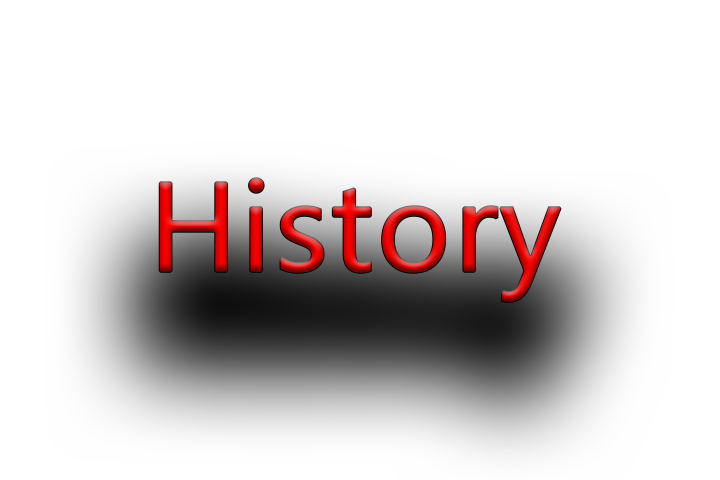
<style>
.page{position:relative;width:720px;height:480px;background:#ffffff}
.page>*{position:absolute;margin:0}
.t1{font:125px "MicrosoftNewTaiLue";color:#ff0000;font-weight:bold}
</style>
<div class="page">
<p class="t1" style="left:158px;top:177px;width:404px;height:126px">History</p>
</div>
